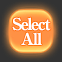
<style>
.page{position:relative;width:62px;height:62px}
.page>*{position:absolute;margin:0}
.t1{font:16px/15px "RyuminPro-ExBold";letter-spacing:-0.08em;color:#ffffff}
</style>
<div class="page">
<p class="t1" style="left:12px;top:17px;width:39px;height:28px;text-align:center">Select<br>All</p>
</div>
